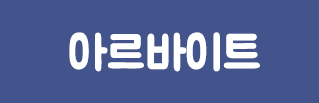
<style>
.page{position:relative;width:319px;height:103px;background:#43548c}
.page>*{position:absolute;margin:0}
.t1{font:48px "BMJUA";color:#ffffff}
</style>
<div class="page">
<p class="t1" style="left:69px;top:32px;width:191px;height:40px">아르바이트</p>
</div>
